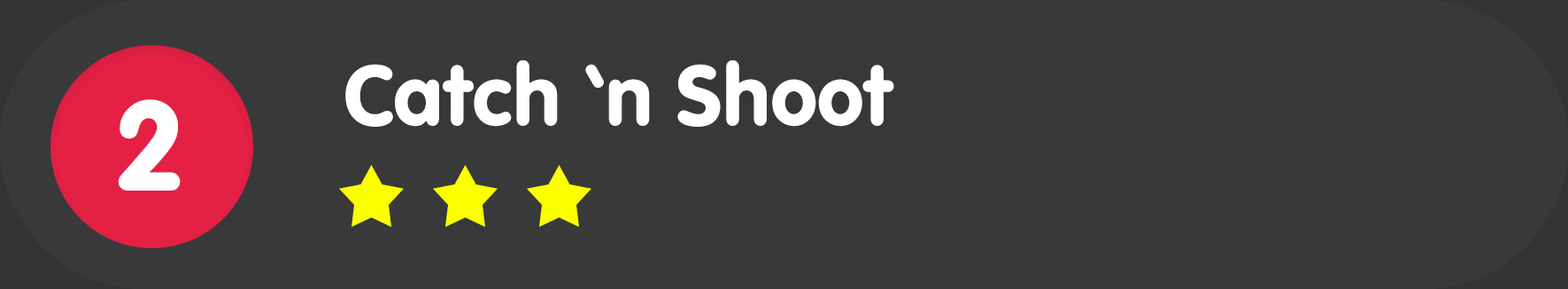
<style>
.page{position:relative;width:1568px;height:289px;background:#393939}
.page>*{position:absolute;margin:0}
.t1{font:88.5px "VAGRundschriftD";color:#ffffff}
.t2{font:132.8px "VAGRundschriftD";color:#ffffff}
</style>
<div class="page">
<p class="t1" style="left:345px;top:59px;width:549px;height:68px">Catch ‘n Shoot</p>
<p class="t2" style="left:118px;top:99px;width:63px;height:91px">2</p>
</div>
